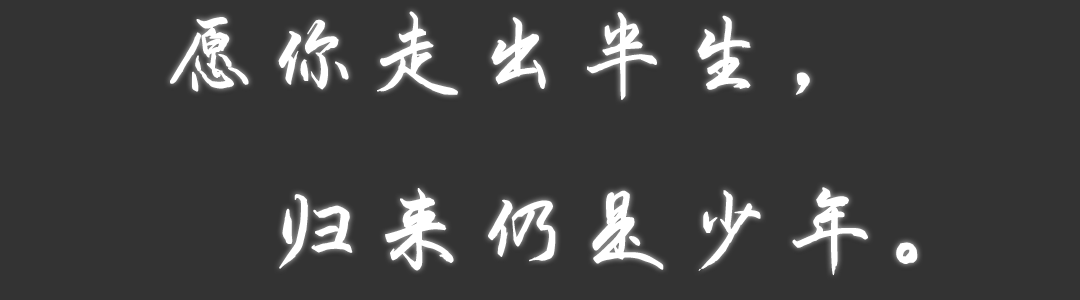
<style>
.page{position:relative;width:1080px;height:300px;background:#333333}
.page>*{position:absolute;margin:0}
.t1{font:100px "HYQingYunW";color:#ffffff;font-weight:bold}
</style>
<div class="page">
<p class="t1" style="left:170px;top:11px;width:748px;height:265px;text-align:center">愿你走出半生，<br>    归来仍是少年。</p>
</div>
